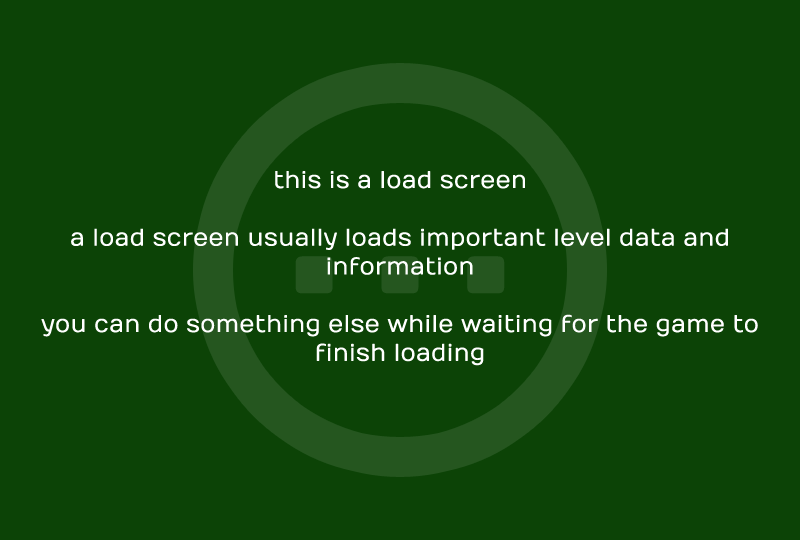
<style>
.page{position:relative;width:800px;height:540px;background:#0c4306}
.page>*{position:absolute;margin:0}
.t1{font:24px "Numans-Regular";color:#ffffff}
</style>
<div class="page">
<p class="t1" style="left:41px;top:171px;width:717px;height:195px;text-align:center">this is a load screen<br><br>a load screen usually loads important level data and <br>information<br><br>you can do something else while waiting for the game to finish loading</p>
</div>
